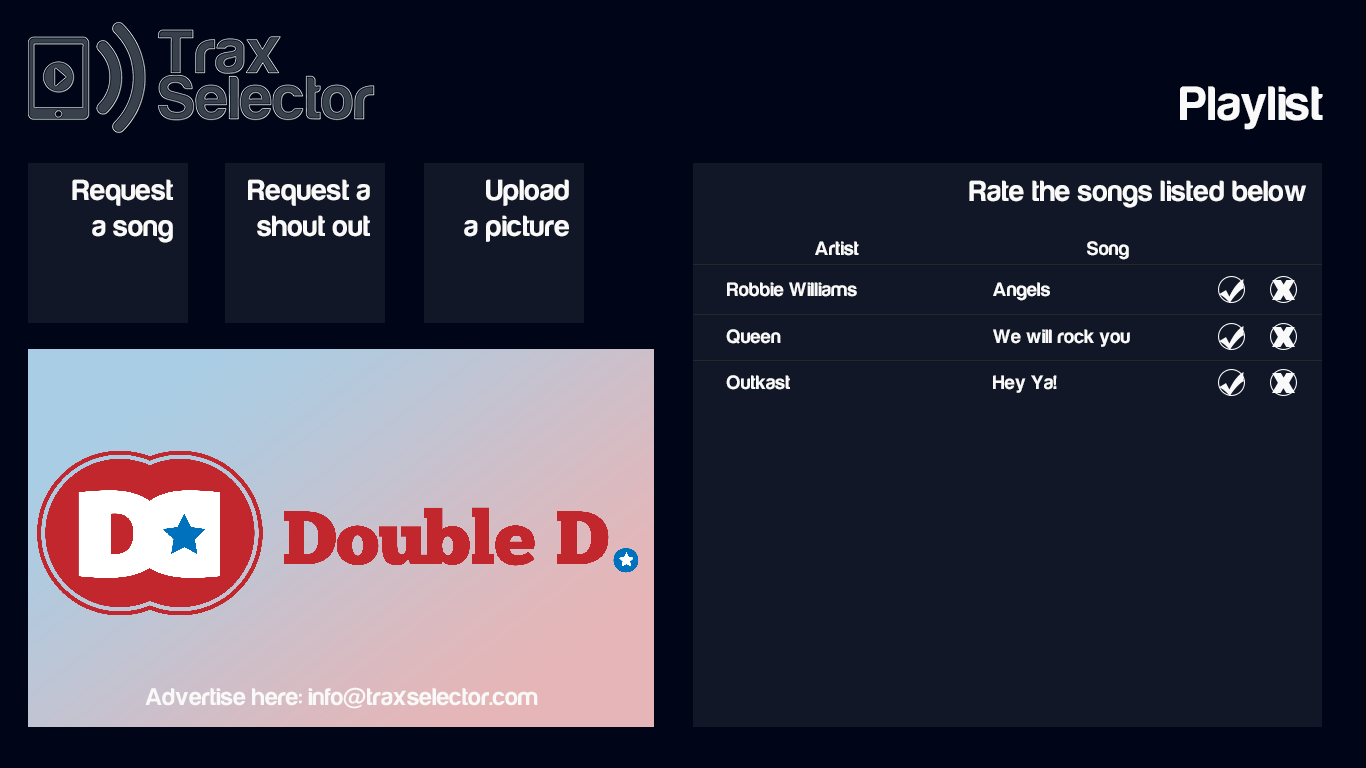
<style>
.page{position:relative;width:1366px;height:768px;background:#111727}
.page>*{position:absolute;margin:0}
.t1{font:50px "Harabara";letter-spacing:0.02em;color:#f8f9f8}
.t2{font:30px "Harabara";letter-spacing:0.02em;color:#f8f9f8}
.t3{font:20px "Harabara";letter-spacing:0.02em;color:#f8f9f8}
.t4{font:25px "Harabara";letter-spacing:0.02em;color:#f8f9f8}
</style>
<div class="page">
<p class="t1" style="left:1180px;top:86px;width:143px;height:44px">Playlist</p>
<p class="t2" style="left:72px;top:179px;width:101px;height:64px;text-align:right">Request<br>a song</p>
<p class="t2" style="left:248px;top:179px;width:122px;height:58px;text-align:right">Request a<br>shout out</p>
<p class="t2" style="left:464px;top:179px;width:105px;height:63px;text-align:right">Upload<br>a picture</p>
<p class="t2" style="left:969px;top:180px;width:337px;height:28px">Rate the songs listed below</p>
<p class="t3" style="left:815px;top:241px;width:44px;height:15px">Artist</p>
<p class="t3" style="left:1087px;top:241px;width:42px;height:19px">Song</p>
<p class="t3" style="left:727px;top:282px;width:130px;height:15px">Robbie Williams</p>
<p class="t3" style="left:993px;top:282px;width:57px;height:19px">Angels</p>
<p class="t3" style="left:726px;top:329px;width:55px;height:15px">Queen</p>
<p class="t3" style="left:993px;top:329px;width:137px;height:18px">We will rock you</p>
<p class="t3" style="left:726px;top:375px;width:64px;height:15px">Outkast</p>
<p class="t3" style="left:993px;top:375px;width:64px;height:18px">Hey Ya!</p>
<p class="t4" style="left:145px;top:687px;width:393px;height:22px">Advertise here: info@traxselector.com</p>
</div>
